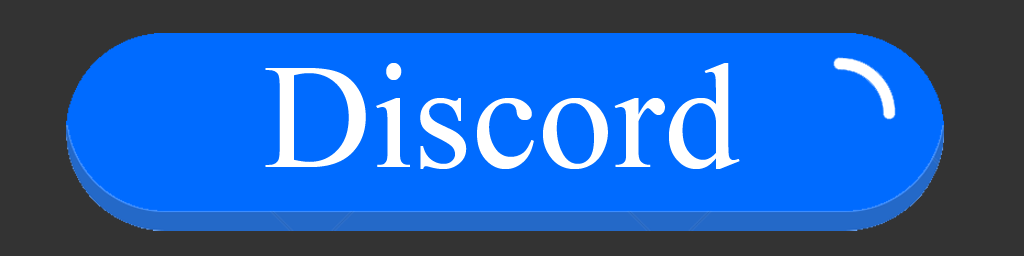
<style>
.page{position:relative;width:1024px;height:256px;background:#006bff}
.page>*{position:absolute;margin:0}
.t1{font:150.3px "TimesNewRomanPSMT";color:#ffffff}
</style>
<div class="page">
<p class="t1" style="left:265px;top:63px;width:475px;height:106px">Discord</p>
</div>
